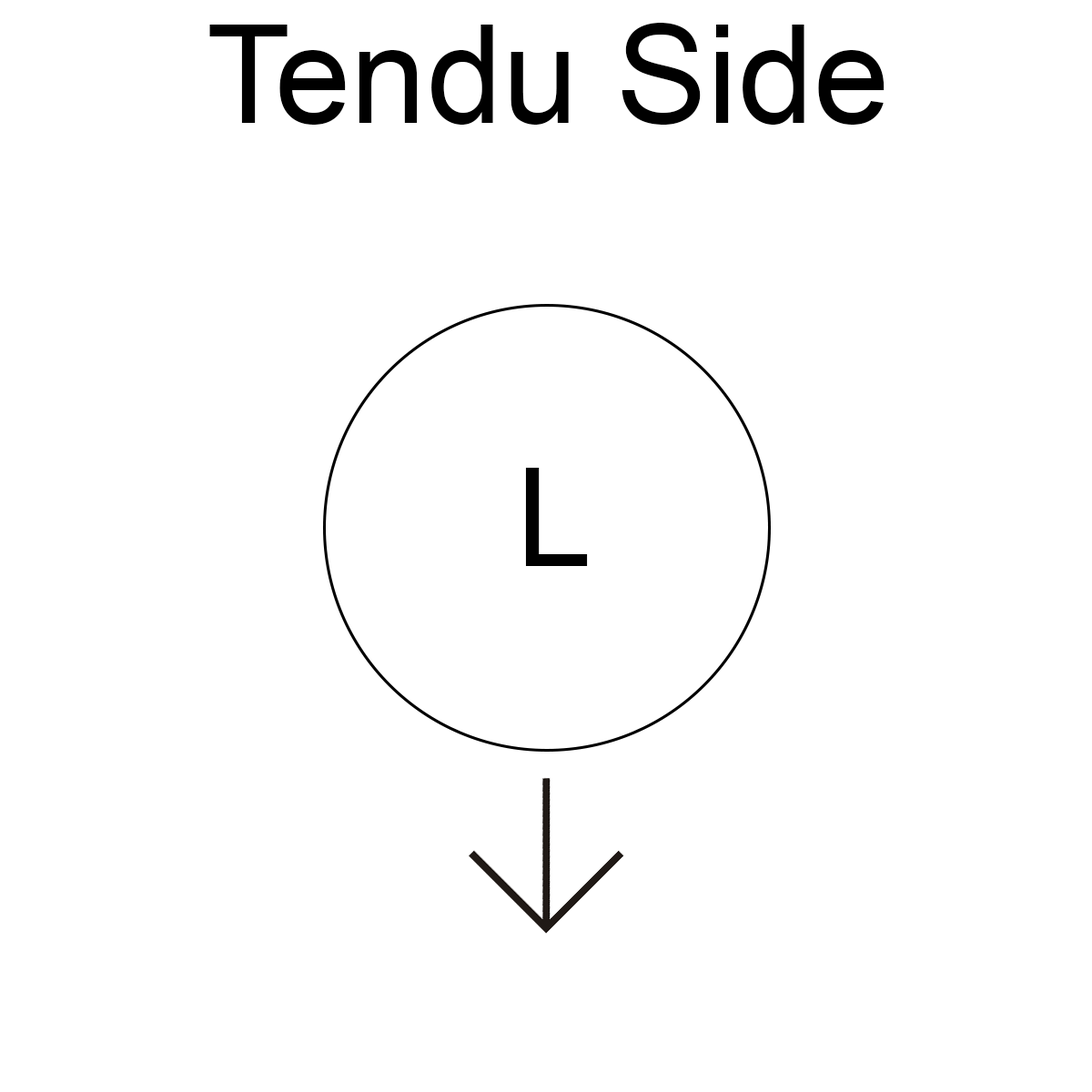
<style>
.page{position:relative;width:1092px;height:1092px;background:#ffffff}
.page>*{position:absolute;margin:0}
.t1{font:136.5px "ArialMT";color:#000000}
</style>
<div class="page">
<p class="t1" style="left:209px;top:23px;width:676px;height:102px">Tendu Side</p>
<p class="t1" style="left:525px;top:468px;width:63px;height:98px">L</p>
</div>
